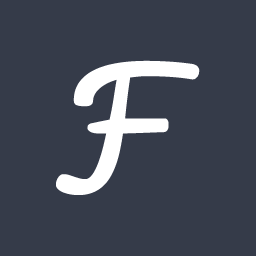
<style>
.page{position:relative;width:256px;height:256px;background:#353b49}
.page>*{position:absolute;margin:0}
.t1{font:144px "Pacifico-Regular";color:#ffffff}
</style>
<div class="page">
<p class="t1" style="left:56px;top:60px;width:144px;height:135px">F</p>
</div>
